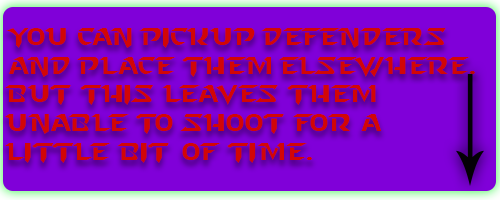
<style>
.page{position:relative;width:500px;height:200px;background:#8000d9}
.page>*{position:absolute;margin:0}
.t1{font:24px "StarcraftNormal";color:#d20606}
</style>
<div class="page">
<p class="t1" style="left:5px;top:28px;width:471px;height:135px">You can pickup defenders and place them elsewhere. But this leaves them unable to shoot for a little bit of time.</p>
</div>
